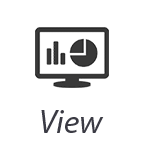
<style>
.page{position:relative;width:142px;height:142px;background:#ffffff}
.page>*{position:absolute;margin:0}
.t1{font:33px "MyriadPro-It";color:#3b3b44}
</style>
<div class="page">
<p class="t1" style="left:41px;top:110px;width:63px;height:23px">View</p>
</div>
